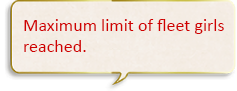
<style>
.page{position:relative;width:237px;height:91px}
.page>*{position:absolute;margin:0}
.t1{font:18px "Calibri";color:#d00000}
</style>
<div class="page">
<p class="t1" style="left:24px;top:19px;width:200px;height:33px">Maximum limit of fleet girls <br>reached.</p>
</div>
